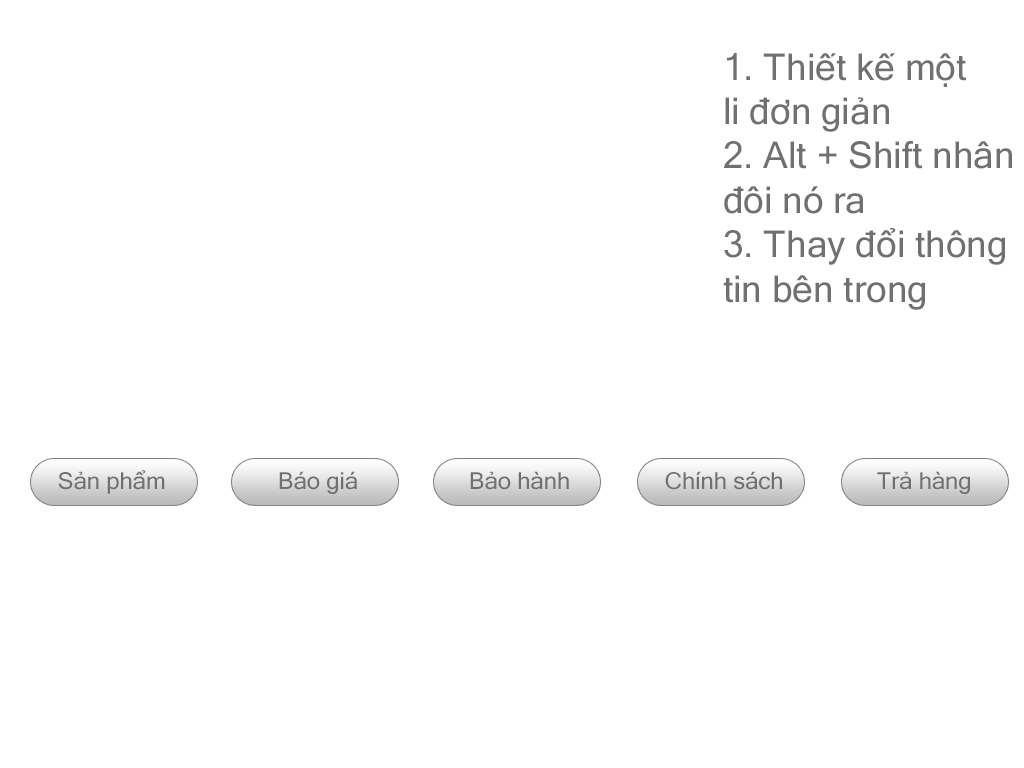
<style>
.page{position:relative;width:1024px;height:768px;background:#ffffff}
.page>*{position:absolute;margin:0}
.t1{font:37px "MicrosoftSansSerif";color:#706f72}
.t2{font:23.5px "MicrosoftSansSerif";color:#706f72}
</style>
<div class="page">
<p class="t1" style="left:723px;top:53px;width:289px;height:257px">1. Thiết kế một<br>li đơn giản<br>2. Alt + Shift nhân<br>đôi nó ra<br>3. Thay đổi thông<br>tin bên trong</p>
<p class="t2" style="left:58px;top:470px;width:107px;height:24px">Sản phẩm</p>
<p class="t2" style="left:279px;top:471px;width:78px;height:23px">Báo giá</p>
<p class="t2" style="left:470px;top:471px;width:99px;height:19px">Bảo hành</p>
<p class="t2" style="left:665px;top:471px;width:117px;height:19px">Chính sách</p>
<p class="t2" style="left:877px;top:471px;width:93px;height:23px">Trả hàng</p>
</div>
